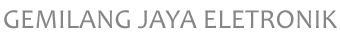
<style>
.page{position:relative;width:340px;height:39px;background:#ffffff}
.page>*{position:absolute;margin:0}
.t1{font:27.6px "Candara";color:#858585}
</style>
<div class="page">
<p class="t1" style="left:4px;top:10px;width:333px;height:19px">GEMILANG JAYA ELETRONIK</p>
</div>
